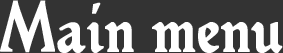
<style>
.page{position:relative;width:283px;height:53px;background:#333333}
.page>*{position:absolute;margin:0}
.t1{font:70.8px "Hamlet-Tertia18";color:#ffffff;font-weight:bold}
</style>
<div class="page">
<p class="t1" style="left:0px;top:0px;width:283px;height:53px">Main menu</p>
</div>
